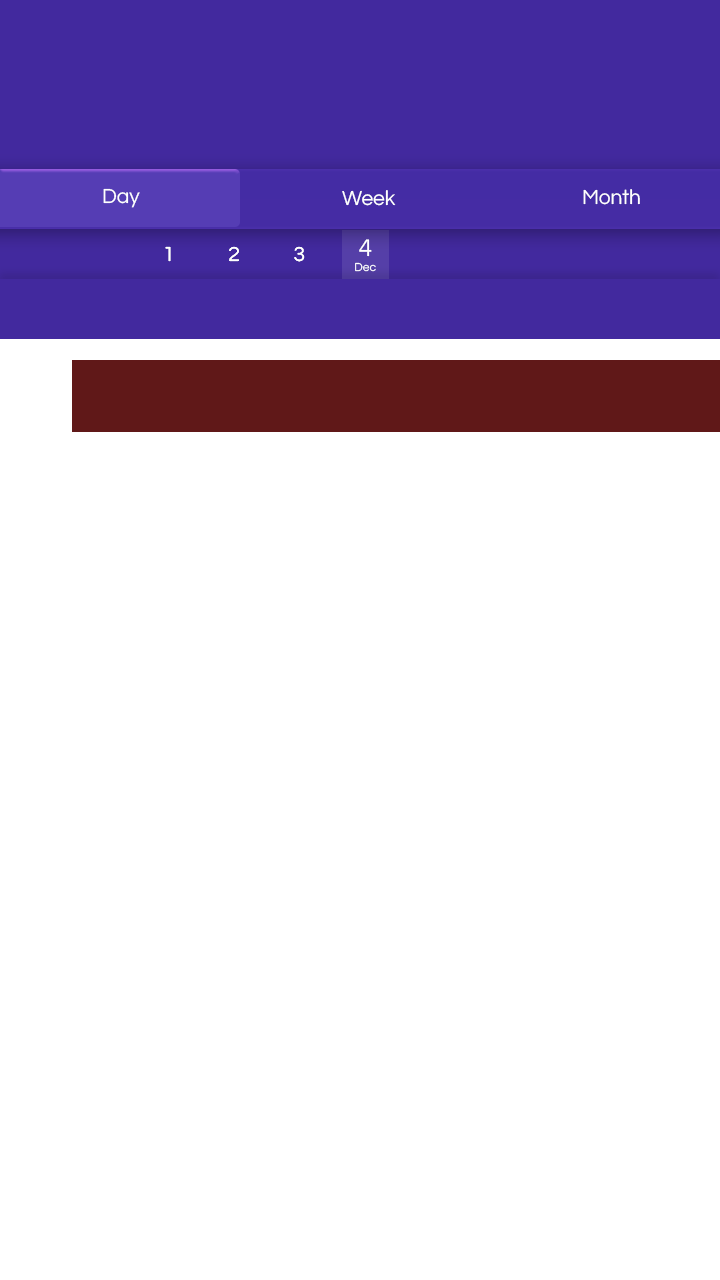
<style>
.page{position:relative;width:720px;height:1280px;background:#ffffff}
.page>*{position:absolute;margin:0}
.t1{font:21px "Questrial-Regular";color:#ffffff}
.t2{font:25px "Questrial-Regular";color:#ffffff}
.t3{font:12px "Questrial-Regular";color:#ffffff}
</style>
<div class="page">
<p class="t1" style="left:103px;top:188px;width:37px;height:20px">Day</p>
<p class="t1" style="left:342px;top:190px;width:54px;height:16px">Week</p>
<p class="t1" style="left:583px;top:189px;width:57px;height:16px">Month</p>
<p class="t1" style="left:165px;top:246px;width:140px;height:16px">1            2            3</p>
<p class="t1" style="left:165px;top:246px;width:140px;height:16px">1            2            3</p>
<p class="t2" style="left:359px;top:239px;width:13px;height:18px">4</p>
<p class="t3" style="left:355px;top:262px;width:21px;height:10px">Dec</p>
</div>
